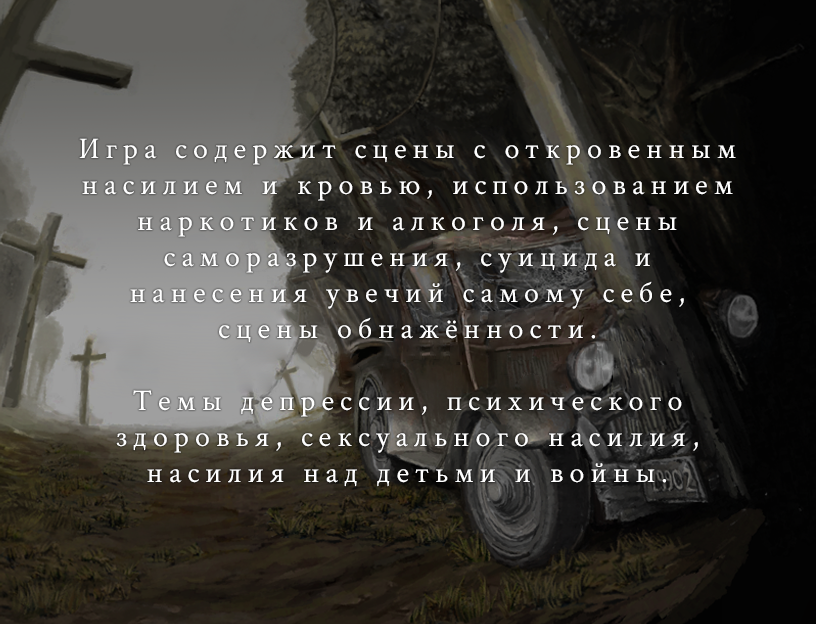
<style>
.page{position:relative;width:816px;height:624px}
.page>*{position:absolute;margin:0}
.t1{font:30px "CrimsonText-Regular";letter-spacing:0.2em;color:#ffffff}
</style>
<div class="page">
<p class="t1" style="left:79px;top:138px;width:657px;height:349px;text-align:center">Игра содержит сцены с откровенным<br>насилием и кровью, использованием<br>наркотиков и алкоголя, сцены<br>саморазрушения, суицида и<br>нанесения увечий самому себе,<br>сцены обнажённости.<br><br>Темы депрессии, психического<br>здоровья, сексуального насилия,<br>насилия над детьми и войны.</p>
</div>
